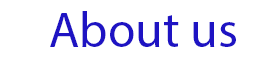
<style>
.page{position:relative;width:274px;height:64px;background:#ffffff}
.page>*{position:absolute;margin:0}
.t1{font:50px "MyriadPro-Regular";color:#1e13c3}
</style>
<div class="page">
<p class="t1" style="left:50px;top:11px;width:186px;height:36px">About us</p>
</div>
